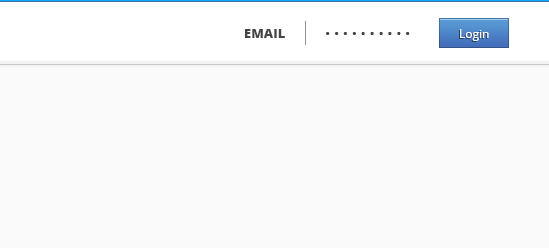
<style>
.page{position:relative;width:549px;height:248px;background:#fafafa}
.page>*{position:absolute;margin:0}
.t1{font:13px "OpenSans-Extrabold";color:#454545}
.t2{font:12px "OpenSans";color:#ffffff}
.t3{font:14px "OpenSans";color:#454545}
</style>
<div class="page">
<p class="t1" style="left:245px;top:29px;width:40px;height:9px">EMAIL</p>
<p class="t2" style="left:460px;top:29px;width:29px;height:12px">Login</p>
<p class="t3" style="left:326px;top:32px;width:84px;height:3px">• • • • • • • • • •</p>
</div>
